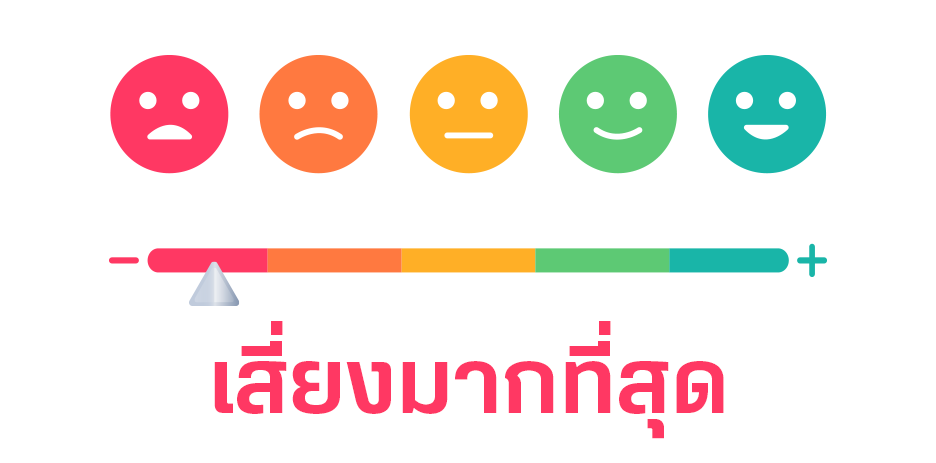
<style>
.page{position:relative;width:936px;height:463px;background:#ffffff}
.page>*{position:absolute;margin:0}
.t1{font:85.1px "PrachasonNeue-SemiBold";color:#ff3863}
</style>
<div class="page">
<p class="t1" style="left:214px;top:321px;width:510px;height:118px">เสี่ยงมากที่สุด</p>
</div>
